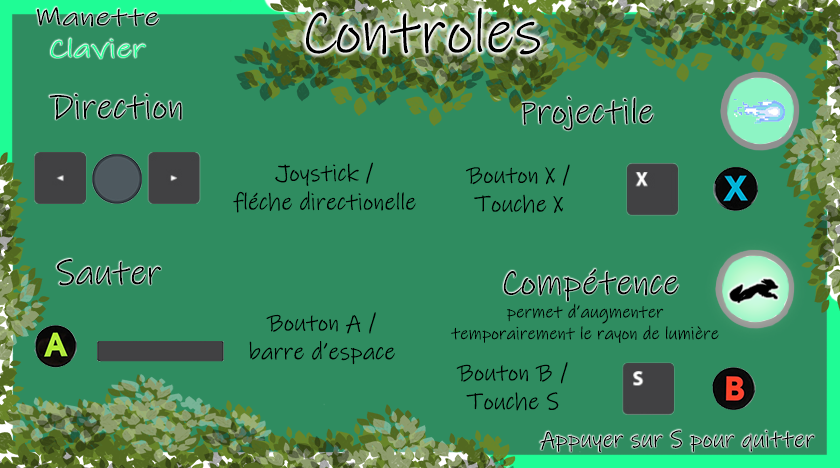
<style>
.page{position:relative;width:840px;height:468px;background:#2f8c60}
.page>*{position:absolute;margin:0}
.t1{font:62.1px "InkFree";color:#000000}
.t2{font:36px "InkFree";color:#000000}
.t3{font:24px "InkFree";color:#000000}
.t4{font:18px "InkFree";color:#000000}
</style>
<div class="page">
<p class="t1" style="left:306px;top:7px;width:234px;height:48px">Controles</p>
<p class="t2" style="left:49px;top:93px;width:133px;height:27px">Direction</p>
<p class="t2" style="left:515px;top:96px;width:139px;height:35px">Projectile</p>
<p class="t3" style="left:233px;top:162px;width:183px;height:51px;text-align:center">Joystick / <br>fléche directionelle</p>
<p class="t3" style="left:466px;top:164px;width:104px;height:49px;text-align:center">Bouton X / <br>Touche X</p>
<p class="t2" style="left:56px;top:259px;width:105px;height:27px">Sauter</p>
<p class="t2" style="left:503px;top:269px;width:176px;height:33px">Compétence</p>
<p class="t4" style="left:451px;top:303px;width:268px;height:40px;text-align:center">permet d’augmenter temporairement le rayon de lumière</p>
<p class="t3" style="left:249px;top:312px;width:146px;height:53px;text-align:center">Bouton A /<br>barre d’espace</p>
<p class="t3" style="left:456px;top:362px;width:112px;height:49px;text-align:center">Bouton B /<br>Touche S<br>Touche</p>
<p class="t3" style="left:540px;top:430px;width:275px;height:22px">Appuyer sur S pour quitter</p>
</div>
